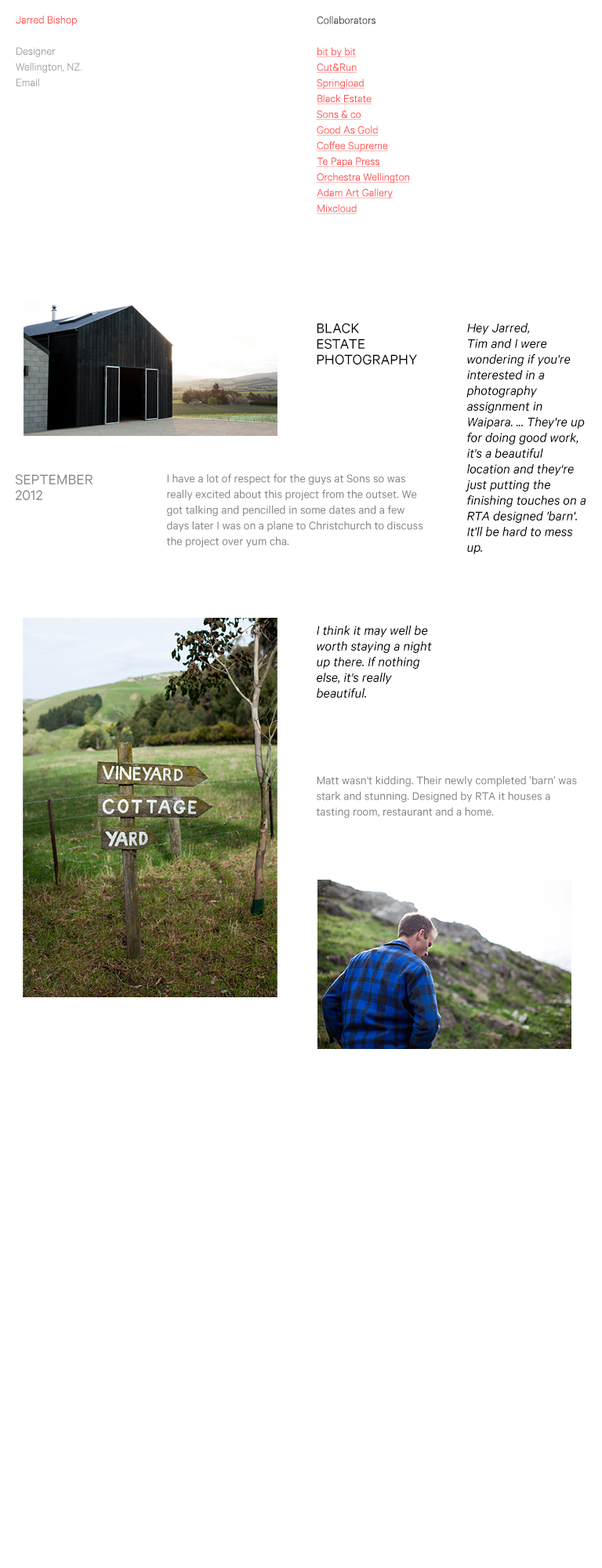
<style>
.page{position:relative;width:602px;height:1568px;background:#ffffff}
.page>*{position:absolute;margin:0}
.t1{font:11.8px/15.7px "Calibre-Light";color:#a9a4a4}
.t2{font:11.8px/15.7px "Calibre-Light";color:#ff5454}
.t3{font:11.8px/15.7px "Calibre-Light";color:#ff5454;text-decoration:underline}
.t4{font:11.8px/15.7px "Calibre-Light";color:#464646}
.t5{font:15.7px/15.7px "Calibre-Regular";color:#000000;text-transform:uppercase}
.t6{font:14.1px/15.7px "Calibre-RegularItalic";color:#000000}
.t7{font:12.5px/15.7px "Calibre-Regular";color:#888888}
.t8{font:15.7px/15.7px "Calibre-Regular";color:#888888;text-transform:uppercase}
</style>
<div class="page">
<p class="t1" style="left:16px;top:16px;width:66px;height:70px"><span class="t2">Jarred Bishop<br><br></span>Designer<br>Wellington, NZ.<br>Email</p>
<p class="t3" style="left:317px;top:16px;width:93px;height:198px"><span class="t4">Collaborators<br><br></span>bit by bit<br>Cut&amp;Run<br>Springload<br>Black Estate<br>Sons &amp; co<br>Good As Gold<br>Coffee Supreme<br>Te Papa Press<br>Orchestra Wellington<br>Adam Art Gallery<br>Mixcloud</p>
<p class="t5" style="left:317px;top:323px;width:100px;height:42px">Black<br>Estate<br>Photography</p>
<p class="t6" style="left:466px;top:323px;width:120px;height:231px">Hey Jarred,  <br>Tim and I were wondering if you're interested in a photography assignment in Waipara. ... They're up for doing good work, it's a beautiful location and they're just putting the finishing touches on a RTA designed 'barn'. It'll be hard to mess up.</p>
<p class="t7" style="left:166px;top:474px;width:257px;height:74px">I have a lot of respect for the guys at Sons so was really excited about this project from the outset. We got talking and pencilled in some dates and a few days later I was on a plane to Christchurch to discuss the project over yum cha.</p>
<p class="t8" style="left:15px;top:474px;width:78px;height:26px">September<br>2012</p>
<p class="t6" style="left:317px;top:626px;width:115px;height:72px">I think it may well be worth staying a night up there. If nothing else, it's really beautiful.</p>
<p class="t7" style="left:316px;top:775px;width:261px;height:43px">Matt wasn't kidding. Their newly completed ’barn’ was stark and stunning. Designed by RTA it houses a tasting room, restaurant and a home.</p>
</div>
